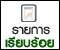
<style>
.page{position:relative;width:60px;height:50px;background:#ffffff}
.page>*{position:absolute;margin:0}
.t1{font:18px "PSLxKittithada-Bold";color:#202020}
.t2{font:18px "PSLxKittithada-Bold";color:#0c5c05;font-weight:bold}
</style>
<div class="page">
<p class="t1" style="left:12px;top:26px;width:38px;height:9px">รายการ</p>
<p class="t2" style="left:5px;top:36px;width:49px;height:12px">เรียบร้อย</p>
</div>
